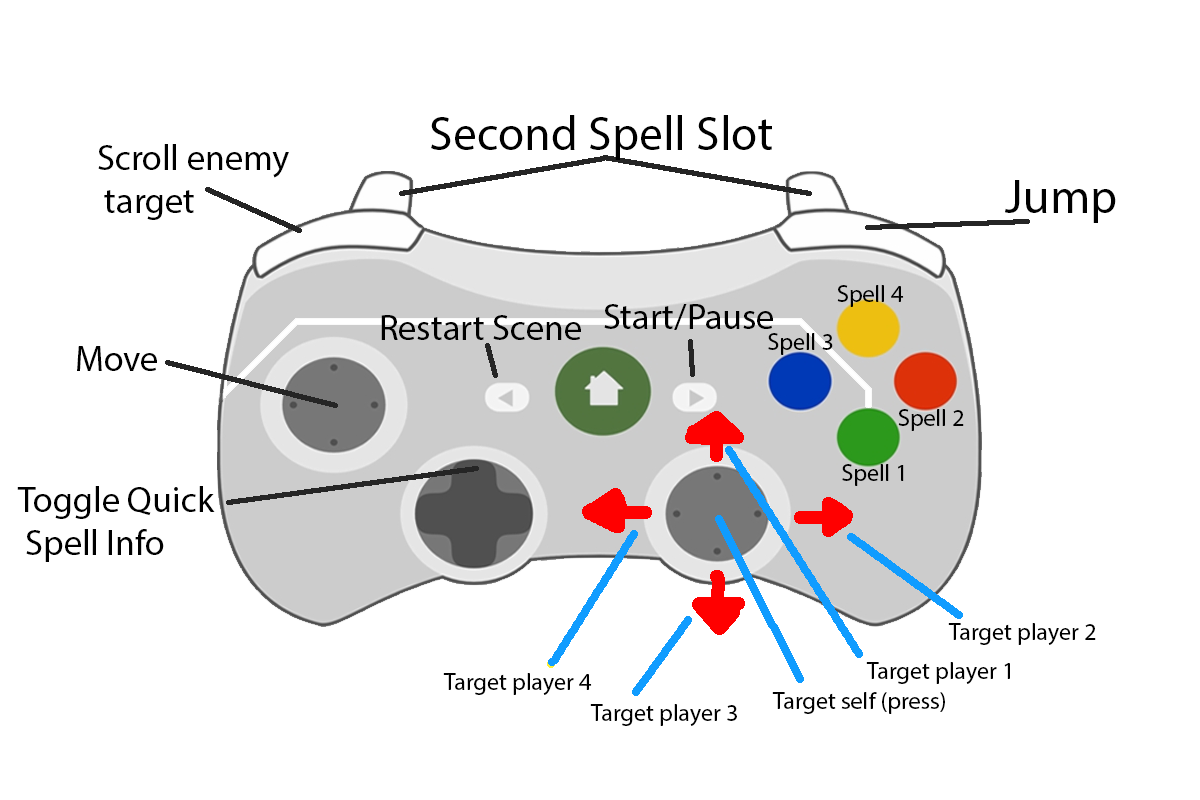
<style>
.page{position:relative;width:1200px;height:800px;background:#ffffff}
.page>*{position:absolute;margin:0}
.t1{font:48px "MyriadPro-Regular";color:#000000}
.t2{font:36px "MyriadPro-Regular";color:#000000}
.t3{font:24px "MyriadPro-Regular";color:#000000}
</style>
<div class="page">
<p class="t1" style="left:431px;top:115px;width:341px;height:45px">Second Spell Slot</p>
<p class="t2" style="left:98px;top:144px;width:191px;height:76px">Scroll enemy<br> target</p>
<p class="t1" style="left:1005px;top:180px;width:111px;height:43px">Jump</p>
<p class="t3" style="left:837px;top:285px;width:67px;height:22px">Spell 4</p>
<p class="t2" style="left:604px;top:304px;width:169px;height:26px">Start/Pause</p>
<p class="t2" style="left:381px;top:315px;width:200px;height:25px">Restart Scene</p>
<p class="t3" style="left:768px;top:333px;width:65px;height:22px">Spell 3</p>
<p class="t2" style="left:77px;top:346px;width:80px;height:25px">Move</p>
<p class="t3" style="left:898px;top:409px;width:66px;height:22px">Spell 2</p>
<p class="t3" style="left:842px;top:464px;width:62px;height:22px">Spell 1</p>
<p class="t2" style="left:17px;top:486px;width:198px;height:76px">Toggle Quick<br> Spell Info</p>
<p class="t3" style="left:948px;top:623px;width:148px;height:22px">Target player 2</p>
<p class="t3" style="left:866px;top:662px;width:144px;height:22px">Target player 1</p>
<p class="t3" style="left:443px;top:673px;width:149px;height:22px">Target player 4</p>
<p class="t3" style="left:772px;top:692px;width:173px;height:22px">Target self (press)</p>
<p class="t3" style="left:590px;top:704px;width:147px;height:22px">Target player 3</p>
</div>
